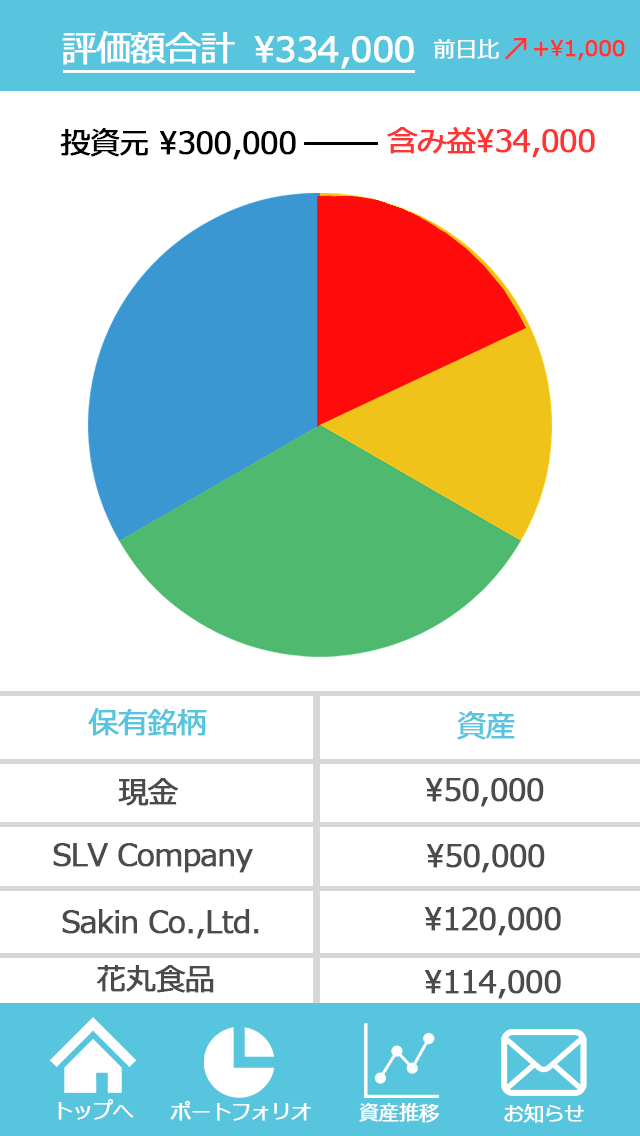
<style>
.page{position:relative;width:640px;height:1136px;background:#ffffff}
.page>*{position:absolute;margin:0}
.t1{font:35.3px "Meiryo";letter-spacing:-0.04em;color:#ffffff;font-weight:bold}
.t2{font:22.3px "Meiryo";letter-spacing:-0.04em;color:#ffffff;font-weight:bold}
.t3{font:30px "Meiryo";letter-spacing:-0.04em;color:#ff3535;font-weight:bold}
.t4{font:22.3px "Meiryo";letter-spacing:-0.04em;color:#ff3535;font-weight:bold}
.t5{font:30px "Meiryo";letter-spacing:-0.04em;color:#000000;font-weight:bold}
.t6{font:30px "Meiryo";letter-spacing:-0.04em;color:#57c5de;font-weight:bold}
.t7{font:30px "Meiryo";letter-spacing:-0.04em;color:#4b4b4b;font-weight:bold}
.t8{font:20.3px "Meiryo";letter-spacing:-0.04em;color:#ffffff;font-weight:bold}
</style>
<div class="page">
<p class="t1" style="left:62px;top:31px;width:173px;height:34px">評価額合計</p>
<p class="t1" style="left:254px;top:36px;width:160px;height:33px">\334,000</p>
<p class="t2" style="left:433px;top:39px;width:66px;height:20px">前日比</p>
<p class="t3" style="left:504px;top:38px;width:23px;height:22px">↗</p>
<p class="t4" style="left:534px;top:40px;width:91px;height:21px">+\1,000</p>
<p class="t5" style="left:60px;top:128px;width:236px;height:32px">投資元 \300,000</p>
<p class="t3" style="left:387px;top:127px;width:208px;height:31px">含み益\34,000</p>
<p class="t6" style="left:88px;top:708px;width:119px;height:28px">保有銘柄</p>
<p class="t6" style="left:457px;top:711px;width:58px;height:29px">資産</p>
<p class="t7" style="left:118px;top:778px;width:60px;height:28px">現金</p>
<p class="t7" style="left:426px;top:778px;width:118px;height:29px">\50,000</p>
<p class="t7" style="left:53px;top:843px;width:200px;height:30px">SLV Company</p>
<p class="t7" style="left:427px;top:844px;width:118px;height:29px">\50,000</p>
<p class="t7" style="left:62px;top:909px;width:197px;height:30px">Sakin Co.,Ltd.</p>
<p class="t7" style="left:425px;top:907px;width:136px;height:29px">\120,000</p>
<p class="t7" style="left:96px;top:965px;width:118px;height:28px">花丸食品</p>
<p class="t7" style="left:425px;top:970px;width:136px;height:29px">\114,000</p>
<p class="t8" style="left:58px;top:1099px;width:76px;height:21px">トップへ</p>
<p class="t8" style="left:170px;top:1101px;width:141px;height:20px">ポートフォリオ</p>
<p class="t8" style="left:359px;top:1102px;width:80px;height:21px">資産推移</p>
<p class="t8" style="left:504px;top:1104px;width:80px;height:19px">お知らせ</p>
</div>
